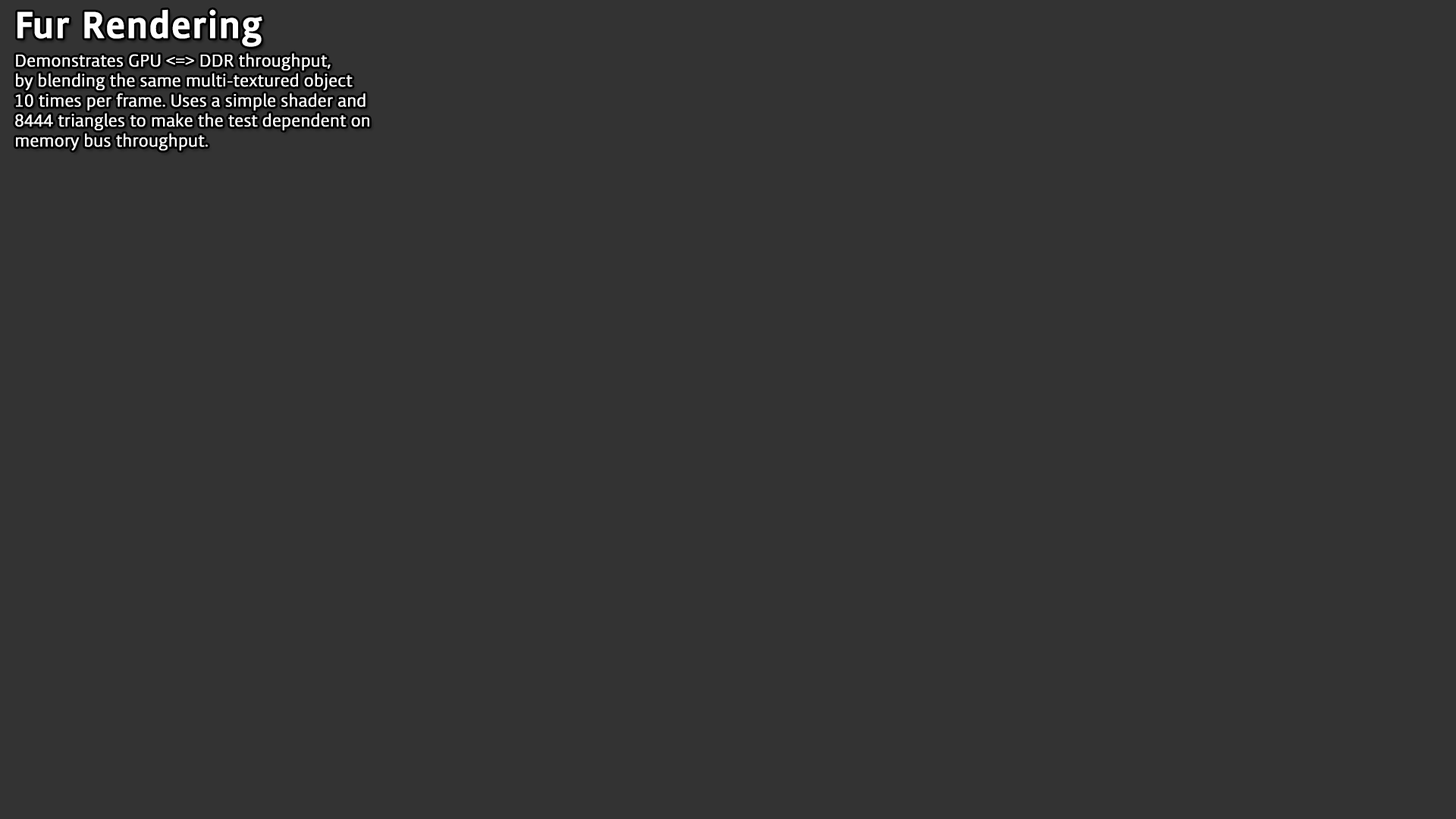
<style>
.page{position:relative;width:1456px;height:819px;background:#333333}
.page>*{position:absolute;margin:0}
.t1{font:36.4px "Tipperary-Bold";color:#ffffff;font-weight:bold}
.t2{font:16.7px "Tipperary";color:#ffffff;font-weight:bold}
</style>
<div class="page">
<p class="t1" style="left:17px;top:9px;width:245px;height:38px">Fur Rendering</p>
<p class="t2" style="left:15px;top:53px;width:354px;height:98px"><span class="t1"><br></span>Demonstrates GPU &lt;=&gt; DDR throughput, <br>by blending the same multi-textured object<br>10 times per frame. Uses a simple shader and<br>8444 triangles to make the test dependent on <br>memory bus throughput.</p>
</div>
